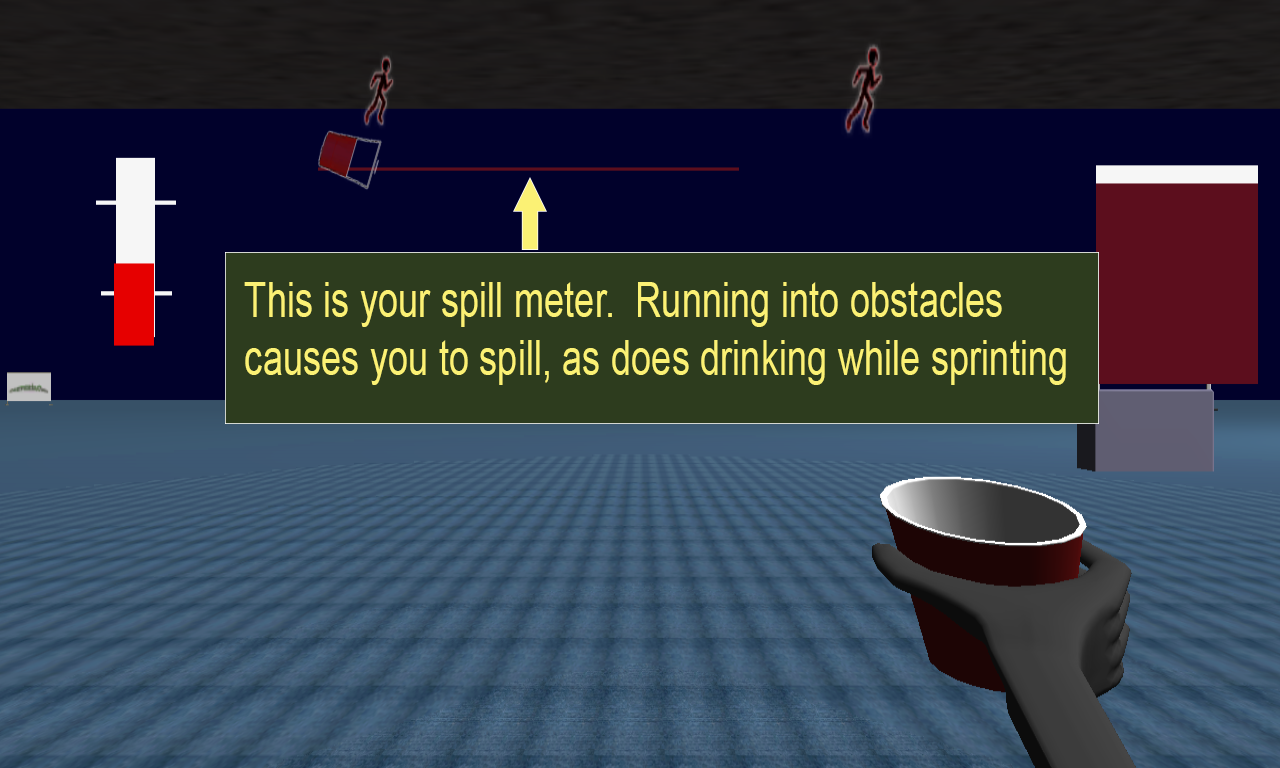
<style>
.page{position:relative;width:1280px;height:768px}
.page>*{position:absolute;margin:0}
.t1{font:48.9px "ArialMT";color:#fbf174;scale:0.75 1}
</style>
<div class="page">
<p class="t1" style="left:244px;top:282px;width:822px;height:103px">This is your spill meter.  Running into obstacles<br>causes you to spill, as does drinking while sprinting</p>
</div>
